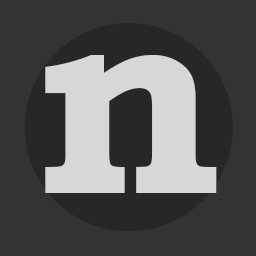
<style>
.page{position:relative;width:256px;height:256px;background:#333333}
.page>*{position:absolute;margin:0}
.t1{font:277.5px "BookmanOldStyle-Bold";color:#d8d8d8}
</style>
<div class="page">
<p class="t1" style="left:45px;top:55px;width:172px;height:138px">n</p>
</div>
